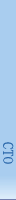
<style>
.page{position:relative;width:16px;height:200px;background:#a9cdef}
.page>*{position:absolute;margin:0}
.t1{font:14.7px "SimSun";color:#2b67aa}
</style>
<div class="page">
<p class="t1" style="left:3px;top:142px;width:11px;height:22px">CTO</p>
</div>
